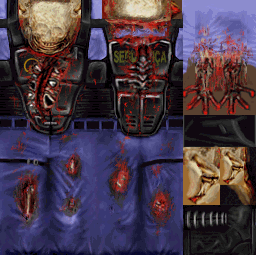
<style>
.page{position:relative;width:256px;height:255px}
.page>*{position:absolute;margin:0}
.t1{font:16.2px "Arial-BoldMT";text-transform:uppercase;scale:0.5 1}
</style>
<div class="page">
<p class="t1" style="left:113px;top:50px;width:54px;height:16px">segurança</p>
</div>
